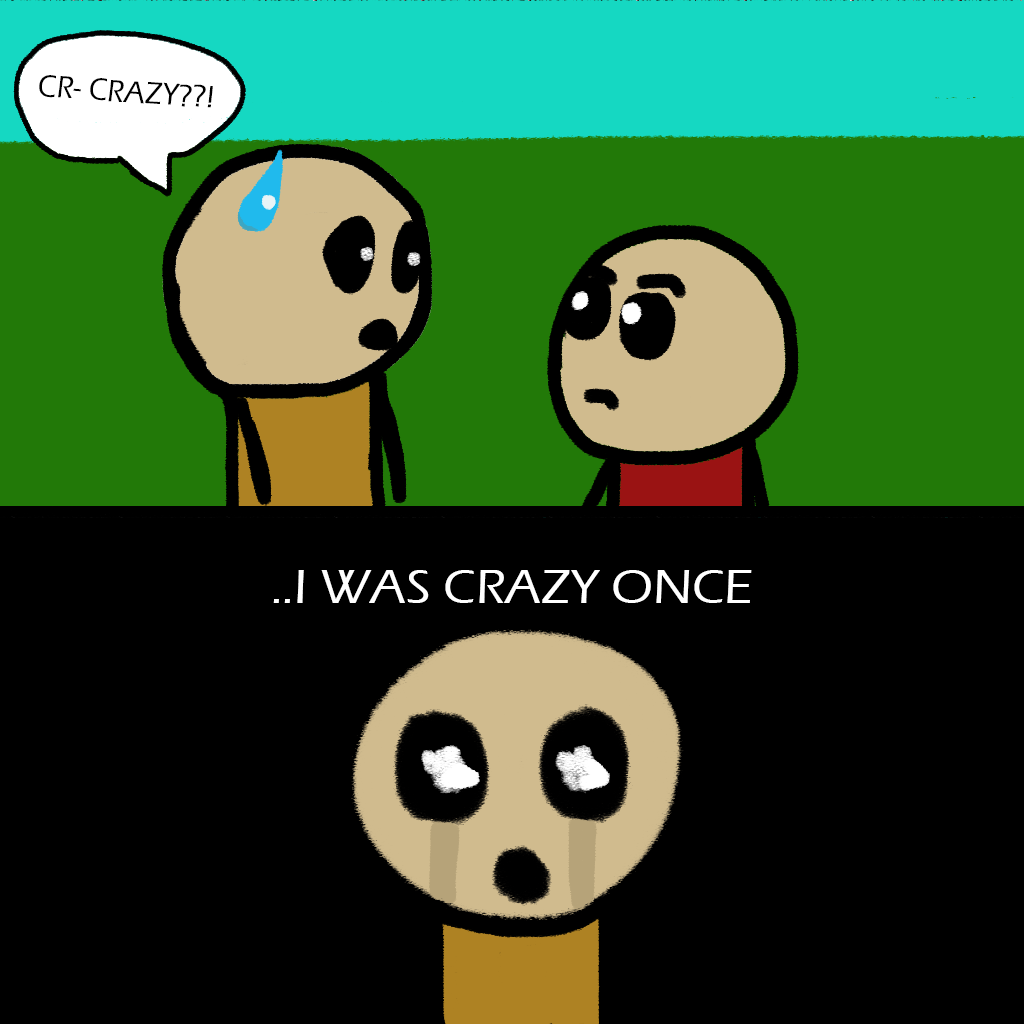
<style>
.page{position:relative;width:1024px;height:1024px;background:#000000}
.page>*{position:absolute;margin:0}
.t1{font:32px "ErasITC-Medium";color:#000000;scale:0.94 1}
.t2{font:49.3px "ErasITC-Medium";color:#ffffff;scale:1.05 1}
</style>
<div class="page">
<p class="t1" style="left:39px;top:75px;width:174px;height:33px;rotate:4deg">CR- CRAZY??!</p>
<p class="t2" style="left:273px;top:570px;width:479px;height:33px">..I WAS CRAZY ONCE</p>
</div>
